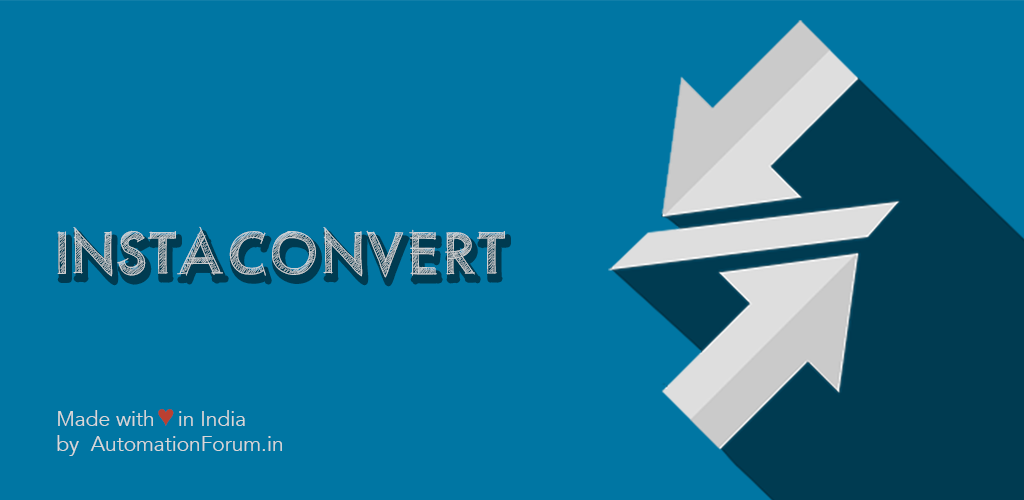
<style>
.page{position:relative;width:1024px;height:500px;background:#0076a3}
.page>*{position:absolute;margin:0}
.t1{font:55.8px "PWScratchedfont";color:#d8d8d8}
.t2{font:20.9px "Avenir-Book";color:#d8d8d8}
.t3{font:27.9px "ArialMT";color:#bb4031}
</style>
<div class="page">
<p class="t1" style="left:57px;top:226px;width:448px;height:52px">InstaConvert</p>
<p class="t2" style="left:57px;top:410px;width:225px;height:46px">Made with    in India <br>by  AutomationForum.in</p>
<p class="t3" style="left:158px;top:409px;width:16px;height:17px">♥︎</p>
</div>
